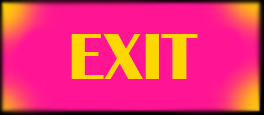
<style>
.page{position:relative;width:264px;height:115px;background:#ff1494}
.page>*{position:absolute;margin:0}
.t1{font:66.7px "BritannicBold";color:#ffd700;font-variant:small-caps}
</style>
<div class="page">
<p class="t1" style="left:71px;top:34px;width:127px;height:45px">EXIT</p>
</div>
